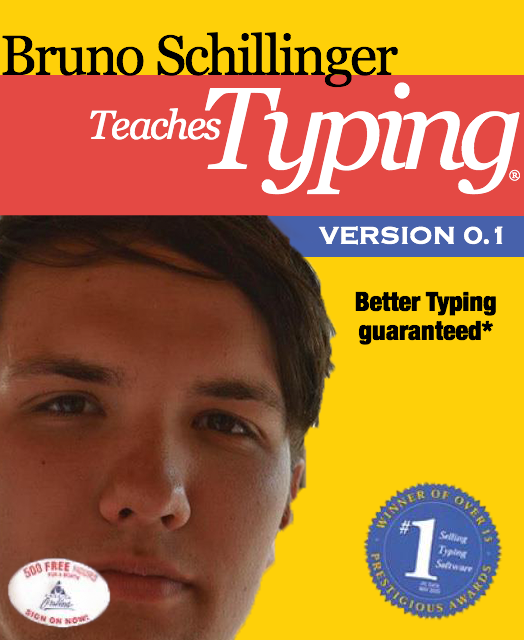
<style>
.page{position:relative;width:524px;height:640px;background:#fed009}
.page>*{position:absolute;margin:0}
.t1{font:56px "Georgia";letter-spacing:-0.041em;color:#000000}
.t2{font:116px "Georgia-Italic";letter-spacing:-0.081em;color:#ffffff}
.t3{font:40px "Georgia-Italic";letter-spacing:-0.041em;color:#ffffff}
.t4{font:12px "Georgia";color:#ffffff}
.t5{font:31.6px "Copperplate";letter-spacing:-0.041em;color:#ffffff}
.t6{font:26.2px/29px "HelveticaNeue-CondensedBlack";color:#000000}
</style>
<div class="page">
<p class="t1" style="left:2px;top:32px;width:396px;height:56px">Bruno Schillinger</p>
<p class="t2" style="left:205px;top:82px;width:315px;height:113px">Typing</p>
<p class="t3" style="left:90px;top:108px;width:131px;height:32px">Teaches</p>
<p class="t4" style="left:509px;top:169px;width:11px;height:12px">®</p>
<p class="t5" style="left:318px;top:226px;width:185px;height:19px">VERSION 0.1</p>
<p class="t6" style="left:355px;top:291px;width:141px;height:54px;text-align:center">Better Typing<br>guaranteed*</p>
</div>
